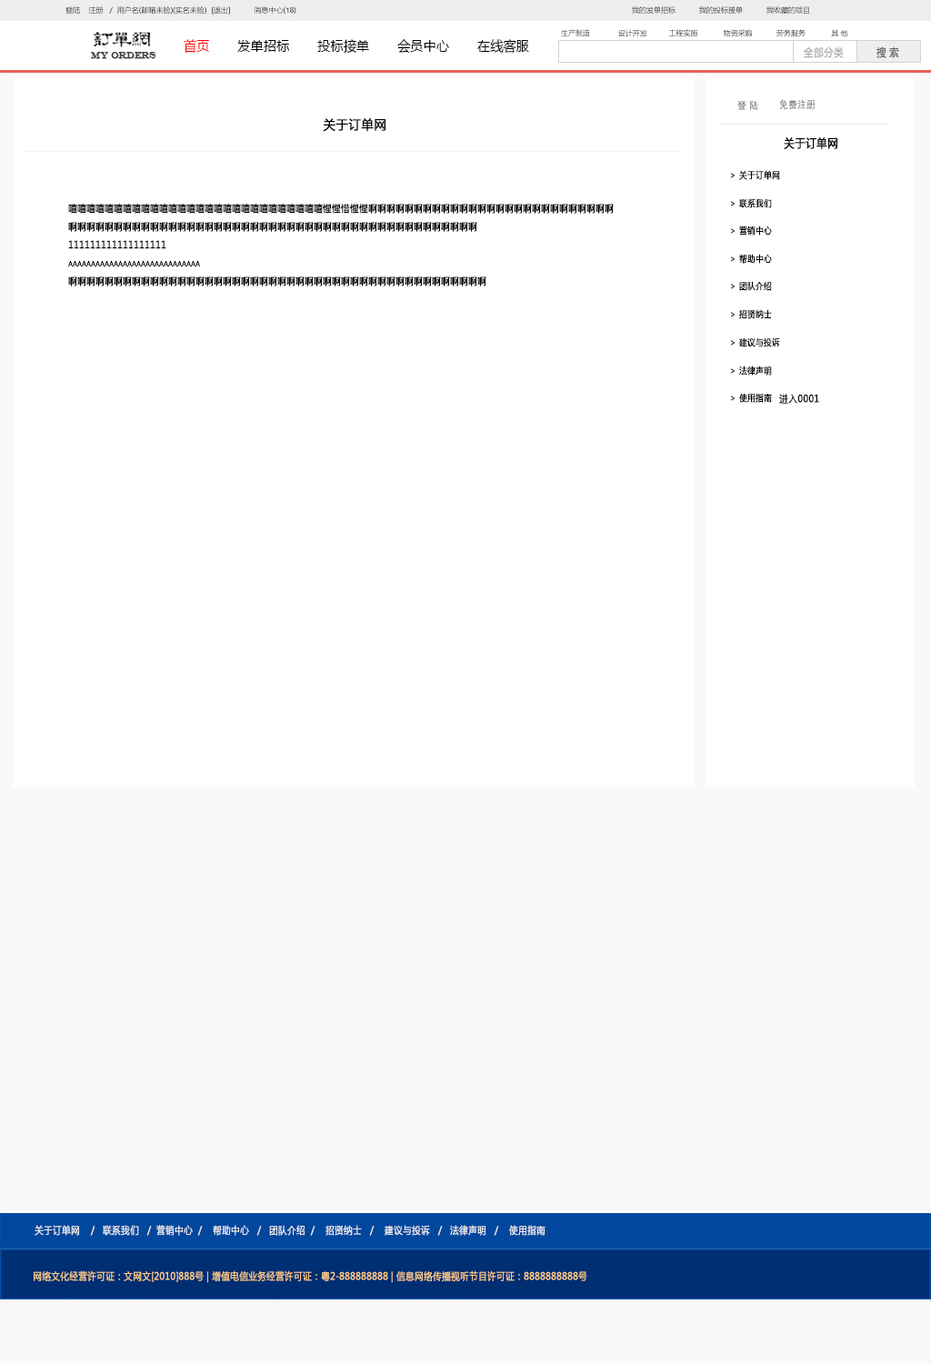
<style>
.page{position:relative;width:931px;height:1364px;background:#ffffff}
.page>*{position:absolute;margin:0}
.t1{font:7.3px "MicrosoftYaHei"}
.t2{font:7.3px "ArialMT"}
.t3{font:14px "MicrosoftYaHei";color:#000000;font-variant:small-caps;scale:0.94 1}
.t4{font:14px "MicrosoftYaHei";color:#ff0000;font-variant:small-caps;scale:0.94 1}
.t5{font:9px "EngraversMT";color:#434343;font-variant:small-caps;font-weight:bold;scale:0.86 1}
.t6{font:11px "MicrosoftYaHei";color:#aaaaaa;font-variant:small-caps;font-weight:bold;scale:0.86 1}
.t7{font:11px "MicrosoftYaHei";color:#626262;font-variant:small-caps;font-weight:bold;scale:0.86 1}
.t8{font:10px "STXihei";color:#767676;font-variant:small-caps;font-weight:bold;scale:0.86 1}
.t9{font:13px "MicrosoftYaHei";color:#000000;font-variant:small-caps;font-weight:bold;scale:0.93 1}
.t10{font:6px "STXihei";color:#dcdcdc;font-variant:small-caps;font-weight:bold;scale:0.86 1}
.t11{font:12px "MicrosoftYaHei";color:#000000;font-variant:small-caps;font-weight:bold;scale:0.86 1}
.t12{font:9px "MicrosoftYaHei";color:#000000;font-variant:small-caps;font-weight:bold;scale:0.86 1}
.t13{font:10px "MicrosoftYaHei";color:#000000;font-variant:small-caps;font-weight:bold;scale:0.86 1}
.t14{font:10px/18.2px "MicrosoftYaHei";color:#000000;font-variant:small-caps;font-weight:bold;scale:0.86 1}
.t15{font:10px "MicrosoftYaHei";color:#eeeeee;font-variant:small-caps;font-weight:bold;scale:0.86 1}
.t16{font:14px "STXihei";color:#eeeeee;font-variant:small-caps;font-weight:bold;scale:0.86 1}
.t17{font:10px "MicrosoftYaHei";color:#facd89;font-variant:small-caps;font-weight:bold;scale:0.87 1}
.t18{font:10px "MicrosoftYaHei";color:#eeeeee;font-variant:small-caps;font-weight:bold;scale:0.87 1}
</style>
<div class="page">
<p class="t1" style="left:65px;top:6px;width:231px;height:9px">登陆    注册   /  用户名(邮箱未验)(实名未验)  [退出]           消息中心(<span class="t2">18</span>)</p>
<p class="t1" style="left:632px;top:6px;width:177px;height:8px">我的发单招标           我的投标接单           我收藏的项目</p>
<p class="t1" style="left:561px;top:29px;width:287px;height:8px">生产制造             设计开发          工程实施            物资采购           劳务服务            其 他</p>
<p class="t3" style="left:184px;top:39px;width:345px;height:15px"><span class="t4">首页       </span>发单招标       投标接单       会员中心       在线客服</p>
<p class="t5" style="left:91px;top:52px;width:65px;height:7px">MY ORDERS</p>
<p class="t6" style="left:804px;top:46px;width:40px;height:12px">全部分类</p>
<p class="t7" style="left:876px;top:46px;width:23px;height:12px">搜 索</p>
<p class="t8" style="left:737px;top:100px;width:21px;height:10px">登 陆</p>
<p class="t8" style="left:779px;top:99px;width:36px;height:10px">免费注册</p>
<p class="t9" style="left:323px;top:118px;width:62px;height:14px">关于订单网</p>
<p class="t10" style="left:720px;top:124px;width:167px;height:1px">--------------------------------------------------------------------------------------------</p>
<p class="t11" style="left:784px;top:137px;width:53px;height:12px">关于订单网</p>
<p class="t12" style="left:731px;top:170px;width:49px;height:10px"><span class="t13"> </span>&gt; 关于订单网</p>
<p class="t14" style="left:68px;top:204px;width:546px;height:82px">嘻嘻嘻嘻嘻嘻嘻嘻嘻嘻嘻嘻嘻嘻嘻嘻嘻嘻嘻嘻嘻嘻嘻嘻嘻嘻嘻嘻惺惺惜惺惺啊啊啊啊啊啊啊啊啊啊啊啊啊啊啊啊啊啊啊啊啊啊啊啊啊啊啊<br>啊啊啊啊啊啊啊啊啊啊啊啊啊啊啊啊啊啊啊啊啊啊啊啊啊啊啊啊啊啊啊啊啊啊啊啊啊啊啊啊啊啊啊啊啊<br>111111111111111111<br>aaaaaaaaaaaaaaaaaaaaaaaaaaaaa<br>啊啊啊啊啊啊啊啊啊啊啊啊啊啊啊啊啊啊啊啊啊啊啊啊啊啊啊啊啊啊啊啊啊啊啊啊啊啊啊啊啊啊啊啊啊啊</p>
<p class="t12" style="left:731px;top:198px;width:41px;height:10px"><span class="t13"> </span>&gt; 联系我们</p>
<p class="t12" style="left:731px;top:225px;width:41px;height:10px"><span class="t13"> </span>&gt; 营销中心</p>
<p class="t12" style="left:731px;top:254px;width:41px;height:10px"><span class="t13"> </span>&gt; 帮助中心</p>
<p class="t12" style="left:731px;top:281px;width:41px;height:10px"><span class="t13"> </span>&gt; 团队介绍</p>
<p class="t12" style="left:731px;top:309px;width:41px;height:10px"><span class="t13"> </span>&gt; 招贤纳士</p>
<p class="t12" style="left:731px;top:337px;width:49px;height:10px"><span class="t13"> </span>&gt; 建议与投诉</p>
<p class="t12" style="left:731px;top:365px;width:41px;height:10px"><span class="t13"> </span>&gt; 法律声明</p>
<p class="t12" style="left:731px;top:393px;width:41px;height:10px"><span class="t13"> </span>&gt; 使用指南</p>
<p class="t13" style="left:779px;top:394px;width:40px;height:10px">进入0001</p>
<p class="t15" style="left:35px;top:1225px;width:510px;height:10px"><span class="t16"><br><br></span>关于订单网    /   联系我们   /  营销中心  /    帮助中心   /   团队介绍  /    招贤纳士   /    建议与投诉   /   法律声明   /    使用指南</p>
<p class="t17" style="left:34px;top:1270px;width:553px;height:13px"><span class="t18"> </span>网络文化经营许可证：文网文[2010]888号 | 增值电信业务经营许可证：粤2-888888888 | 信息网络传播视听节目许可证：8888888888号</p>
</div>
